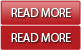
<style>
.page{position:relative;width:81px;height:50px;background:#b61d22}
.page>*{position:absolute;margin:0}
.t1{font:12px "MyriadPro-Regular";color:#ffffff}
</style>
<div class="page">
<p class="t1" style="left:11px;top:8px;width:60px;height:9px">READ MORE</p>
<p class="t1" style="left:11px;top:33px;width:60px;height:9px">READ MORE</p>
</div>
